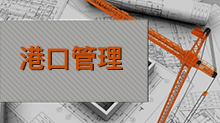
<style>
.page{position:relative;width:220px;height:123px}
.page>*{position:absolute;margin:0}
.t1{font:26px "PingFang-SC-Heavy";color:#c74e05}
.t2{font:26px "PingFang-SC-Heavy"}
</style>
<div class="page">
<p class="t1" style="left:19px;top:45px;width:103px;height:25px">港口管理</p>
<p class="t2" style="left:21px;top:46px;width:102px;height:25px">港口管理</p>
</div>
